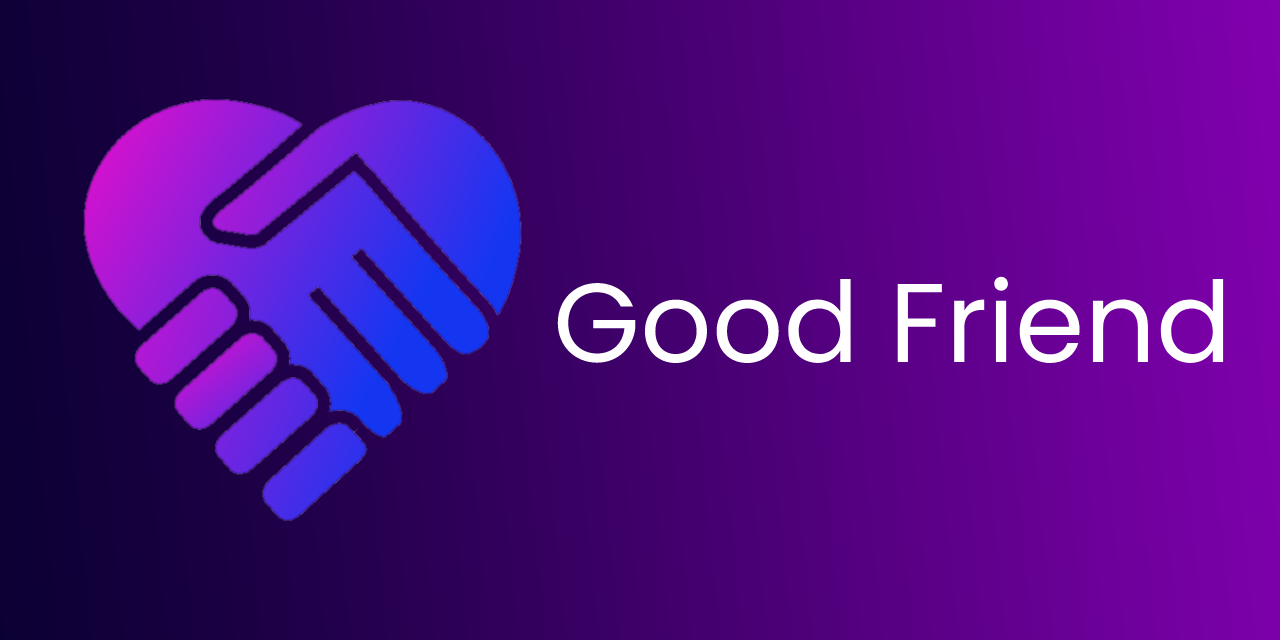
<style>
.page{position:relative;width:1280px;height:640px}
.page>*{position:absolute;margin:0}
.t1{font:112px "Poppins-Regular";color:#ffffff}
</style>
<div class="page">
<p class="t1" style="left:557px;top:276px;width:667px;height:88px">Good Friend</p>
</div>
